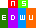
<style>
.page{position:relative;width:36px;height:28px;background:#ffffff}
.page>*{position:absolute;margin:0}
.t1{font:8px "KenPixel-Mini-Square";color:#ffffff}
</style>
<div class="page">
<p class="t1" style="left:11px;top:1px;width:4px;height:5px">N</p>
<p class="t1" style="left:22px;top:1px;width:4px;height:5px">S</p>
<p class="t1" style="left:2px;top:15px;width:4px;height:5px">e</p>
<p class="t1" style="left:11px;top:15px;width:4px;height:5px">D</p>
<p class="t1" style="left:20px;top:15px;width:5px;height:5px">W</p>
<p class="t1" style="left:29px;top:15px;width:4px;height:5px">U</p>
</div>
